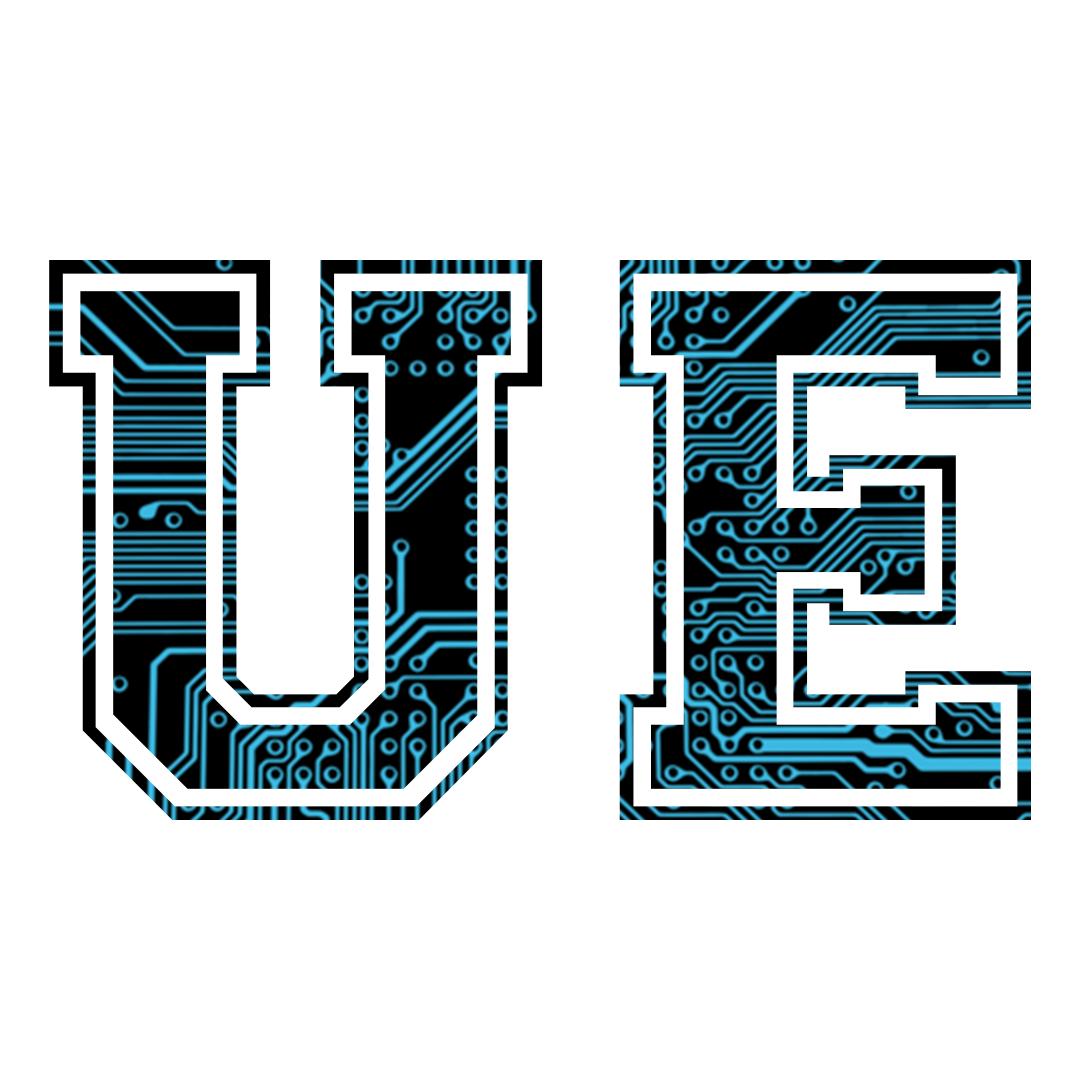
<style>
.page{position:relative;width:1080px;height:1080px;background:#ffffff}
.page>*{position:absolute;margin:0}
.t1{font:800px "Varsity-Regular"}
</style>
<div class="page">
<p class="t1" style="left:49px;top:260px;width:982px;height:560px">UE</p>
</div>
